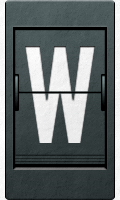
<style>
.page{position:relative;width:120px;height:200px}
.page>*{position:absolute;margin:0}
.t1{font:132px "LeagueGothic";letter-spacing:0.06em;color:#ffffff;scale:1.09 1}
</style>
<div class="page">
<p class="t1" style="left:25px;top:46px;width:70px;height:97px">W</p>
</div>
